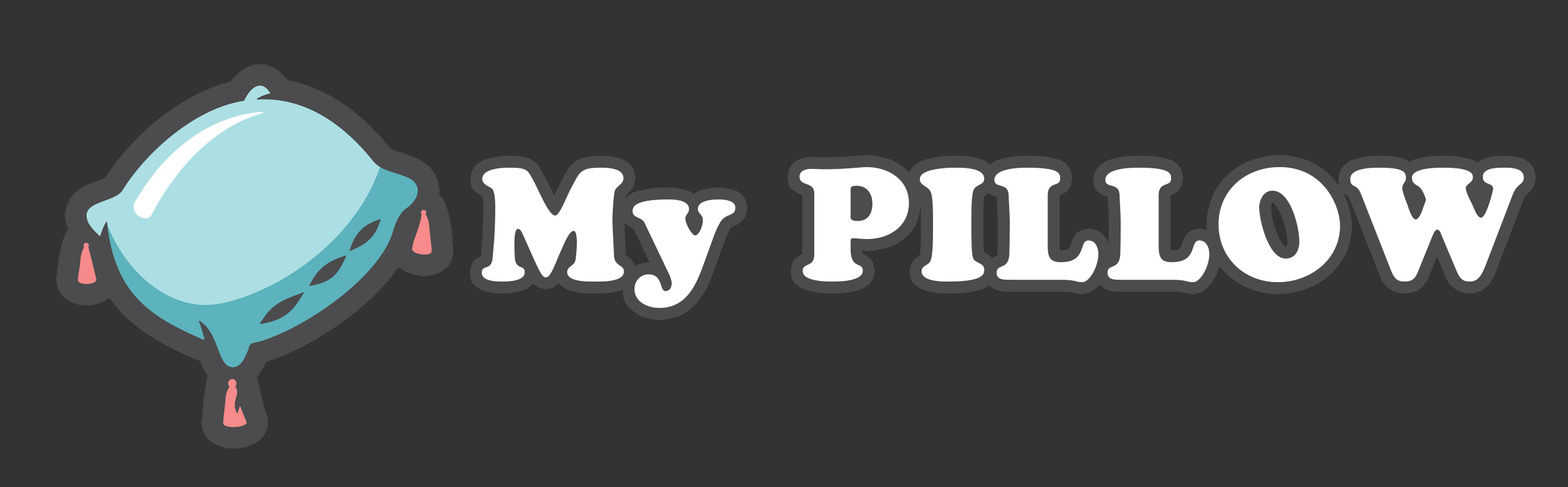
<style>
.page{position:relative;width:1568px;height:487px;background:#333333}
.page>*{position:absolute;margin:0}
.t1{font:157.8px "CooperBlackStd";letter-spacing:0.04em;color:#ffffff}
</style>
<div class="page">
<p class="t1" style="left:481px;top:167px;width:1043px;height:141px">My PILLOW</p>
</div>
